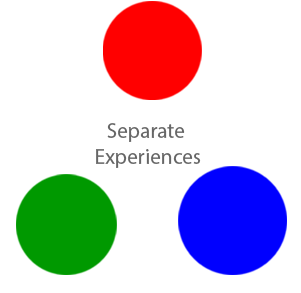
<style>
.page{position:relative;width:301px;height:293px;background:#ffffff}
.page>*{position:absolute;margin:0}
.t1{font:21.4px "MyriadPro-Regular";color:#666666}
</style>
<div class="page">
<p class="t1" style="left:96px;top:123px;width:105px;height:45px;text-align:center">Separate <br>Experiences</p>
</div>
